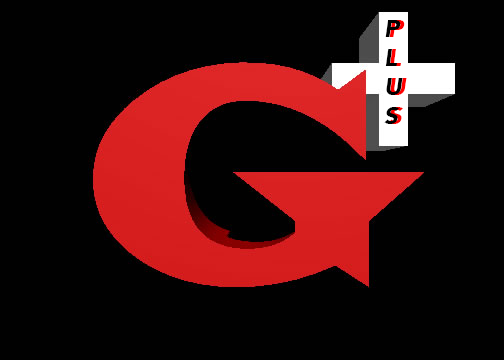
<style>
.page{position:relative;width:504px;height:360px;background:#010101}
.page>*{position:absolute;margin:0}
.t1{font:24px "Avenir-BlackOblique";color:#000000}
.t2{font:24px "Avenir-BlackOblique";color:#ff0000}
</style>
<div class="page">
<p class="t1" style="left:384px;top:20px;width:19px;height:104px">P<br>L<br>U<br>S</p>
<p class="t2" style="left:388px;top:20px;width:19px;height:104px">P<br>L<br>U<br>S</p>
</div>
